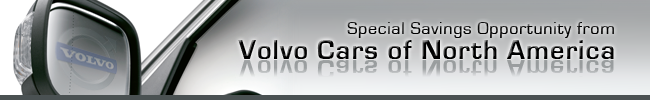
<style>
.page{position:relative;width:650px;height:100px}
.page>*{position:absolute;margin:0}
.t1{font:18px/25px "EurostileRegular";letter-spacing:0.04em;color:#000000}
.t2{font:28px/25px "EurostileBold";letter-spacing:0.04em;color:#000000}
</style>
<div class="page">
<p class="t1" style="left:238px;top:22px;width:376px;height:37px;text-align:right">Special Savings Opportunity from<br><span class="t2">Volvo Cars of North America</span></p>
</div>
